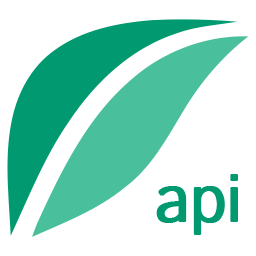
<style>
.page{position:relative;width:256px;height:256px;background:#ffffff}
.page>*{position:absolute;margin:0}
.t1{font:66.7px "Istok-Regular";letter-spacing:0.005em;color:#019970;font-weight:bold}
</style>
<div class="page">
<p class="t1" style="left:156px;top:174px;width:82px;height:61px">api</p>
</div>
